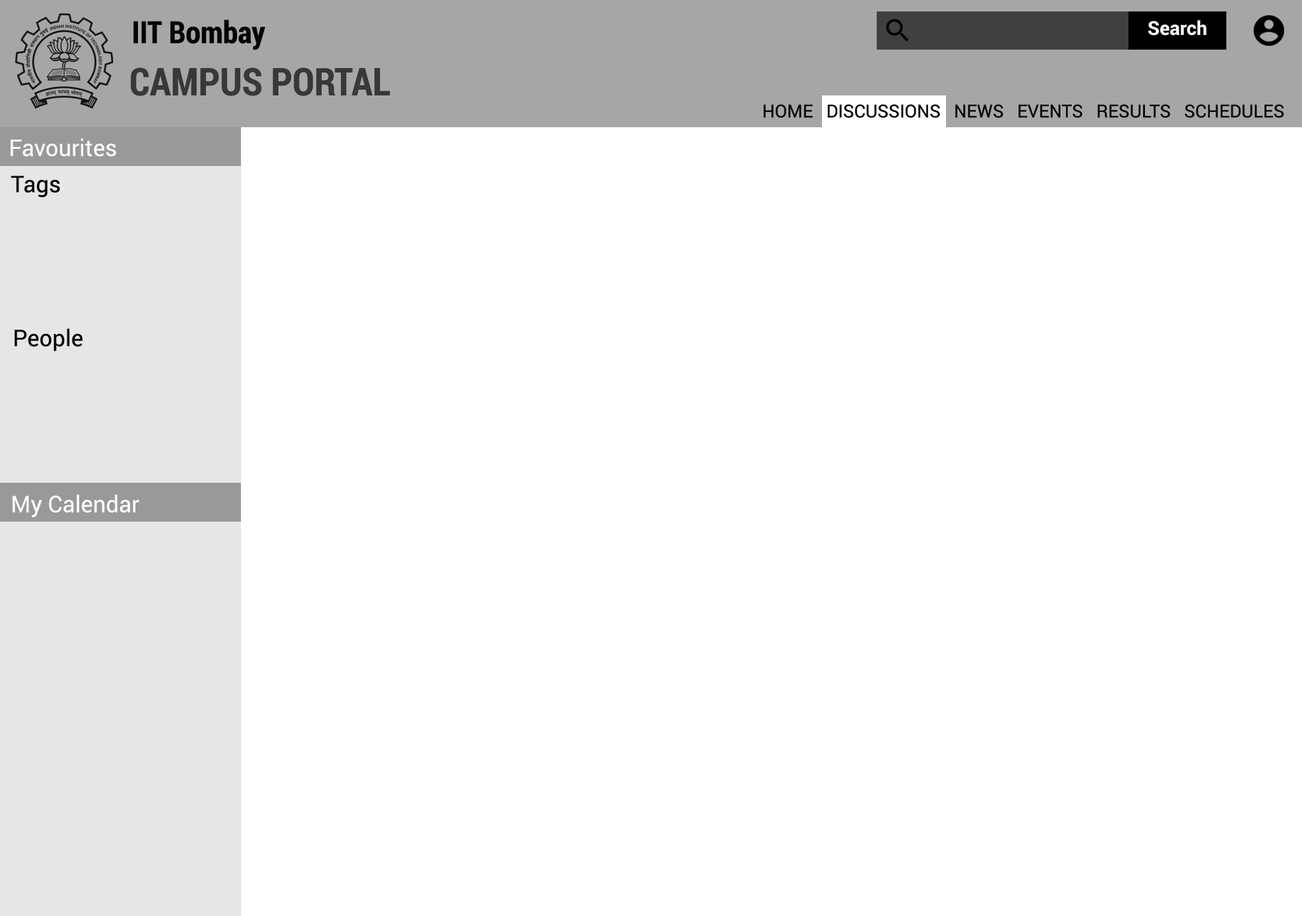
<style>
.page{position:relative;width:1302px;height:916px;background:#ffffff}
.page>*{position:absolute;margin:0}
.t1{font:30.5px "RobotoCondensed-Bold";color:#040404}
.t2{font:19.1px "Roboto-Bold";color:#f8f8f8}
.t3{font:38.2px "RobotoCondensed-Bold";color:#383838}
.t4{font:17.8px "Roboto-Regular";color:#090909}
.t5{font:22.9px "Roboto-Regular";color:#fafafa}
.t6{font:22.9px "Roboto-Regular";color:#090909}
</style>
<div class="page">
<p class="t1" style="left:134px;top:20px;width:132px;height:30px">IIT Bombay</p>
<p class="t2" style="left:1148px;top:20px;width:59px;height:16px">Search</p>
<p class="t3" style="left:130px;top:67px;width:260px;height:29px">CAMPUS PORTAL</p>
<p class="t4" style="left:764px;top:104px;width:520px;height:14px">HOME   DISCUSSIONS   NEWS   EVENTS   RESULTS   SCHEDULES</p>
<p class="t5" style="left:10px;top:138px;width:106px;height:18px">Favourites</p>
<p class="t6" style="left:11px;top:176px;width:49px;height:21px">Tags</p>
<p class="t6" style="left:15px;top:328px;width:68px;height:23px">People</p>
<p class="t5" style="left:12px;top:494px;width:127px;height:23px">My Calendar</p>
</div>
